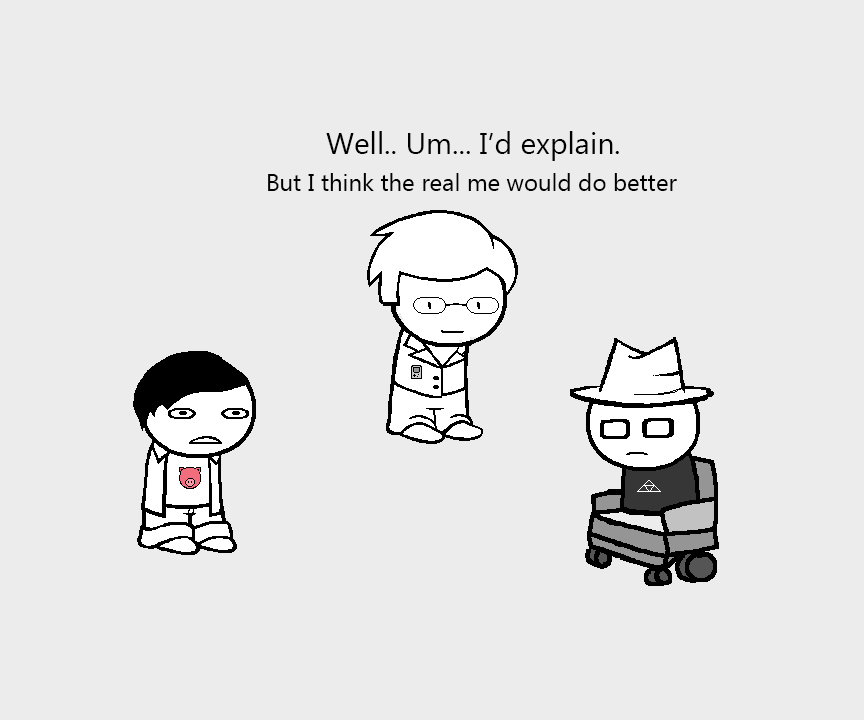
<style>
.page{position:relative;width:864px;height:720px;background:#ececec}
.page>*{position:absolute;margin:0}
.t1{font:30px "MicrosoftNewTaiLue";color:#000000}
.t2{font:24px "MicrosoftNewTaiLue";color:#000000}
</style>
<div class="page">
<p class="t1" style="left:326px;top:131px;width:293px;height:30px">Well.. Um... I’d explain.</p>
<p class="t2" style="left:268px;top:173px;width:409px;height:18px">But I think the real me would do better</p>
</div>
